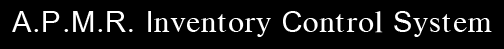
<style>
.page{position:relative;width:504px;height:49px;background:#000000}
.page>*{position:absolute;margin:0}
.t1{font:29.2px "AWLPhonetics3Unicode";color:#ffffff}
</style>
<div class="page">
<p class="t1" style="left:12px;top:11px;width:480px;height:26px">A.P.M.R. Inventory Control System</p>
</div>
